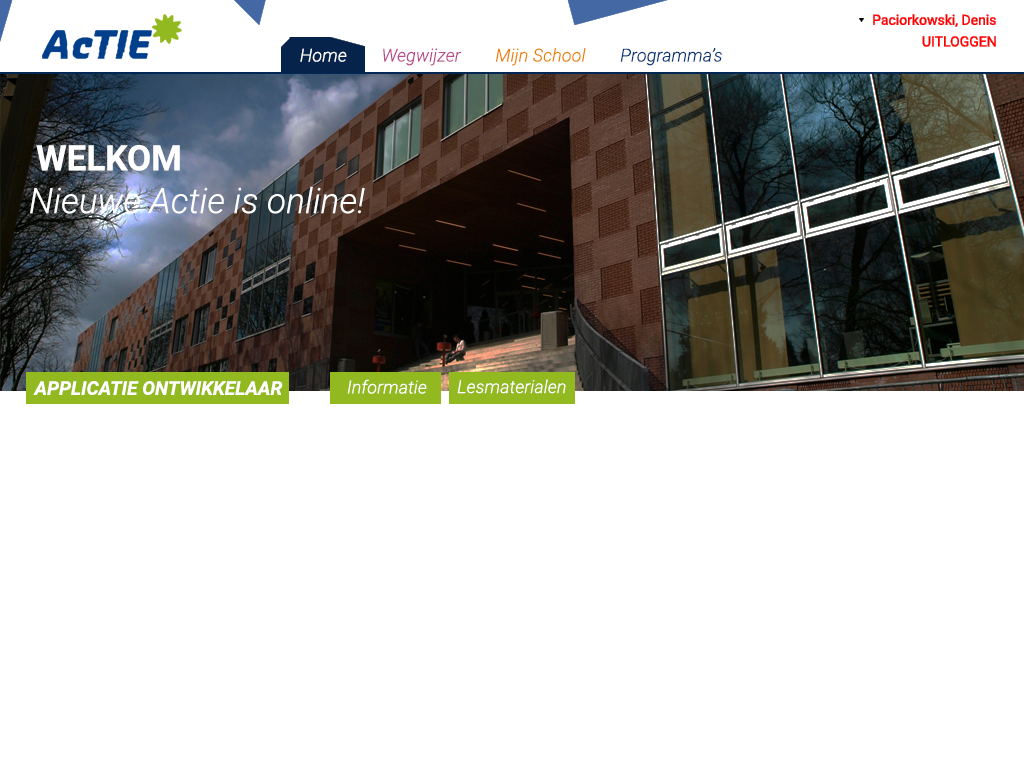
<style>
.page{position:relative;width:1024px;height:768px;background:#ffffff}
.page>*{position:absolute;margin:0}
.t1{font:14px "Roboto-Regular";color:#ff0000}
.t2{font:18px "Roboto-LightItalic";color:#ed8400}
.t3{font:18px "Roboto-LightItalic";color:#ffffff}
.t4{font:18px "Roboto-LightItalic";color:#b94c8d}
.t5{font:18px "Roboto-LightItalic";color:#09387a}
.t6{font:35px "Roboto-Bold";color:#ffffff}
.t7{font:35px "Roboto-LightItalic";color:#ffffff}
.t8{font:19px "Roboto-BoldItalic";color:#ffffff}
</style>
<div class="page">
<p class="t1" style="left:873px;top:14px;width:123px;height:13px">Paciorkowski, Denis</p>
<p class="t1" style="left:922px;top:36px;width:74px;height:11px">UITLOGGEN</p>
<p class="t2" style="left:300px;top:48px;width:422px;height:18px"><span class="t3">Home        </span><span class="t4">Wegwijzer        </span>Mijn School        <span class="t5">Programma’s</span></p>
<p class="t6" style="left:36px;top:145px;width:144px;height:26px">WELKOM</p>
<p class="t7" style="left:30px;top:186px;width:335px;height:28px">Nieuwe Actie is online!</p>
<p class="t8" style="left:33px;top:381px;width:250px;height:14px">APPLICATIE ONTWIKKELAAR</p>
<p class="t3" style="left:347px;top:379px;width:80px;height:15px">Informatie</p>
<p class="t3" style="left:457px;top:379px;width:109px;height:15px">Lesmaterialen</p>
</div>
